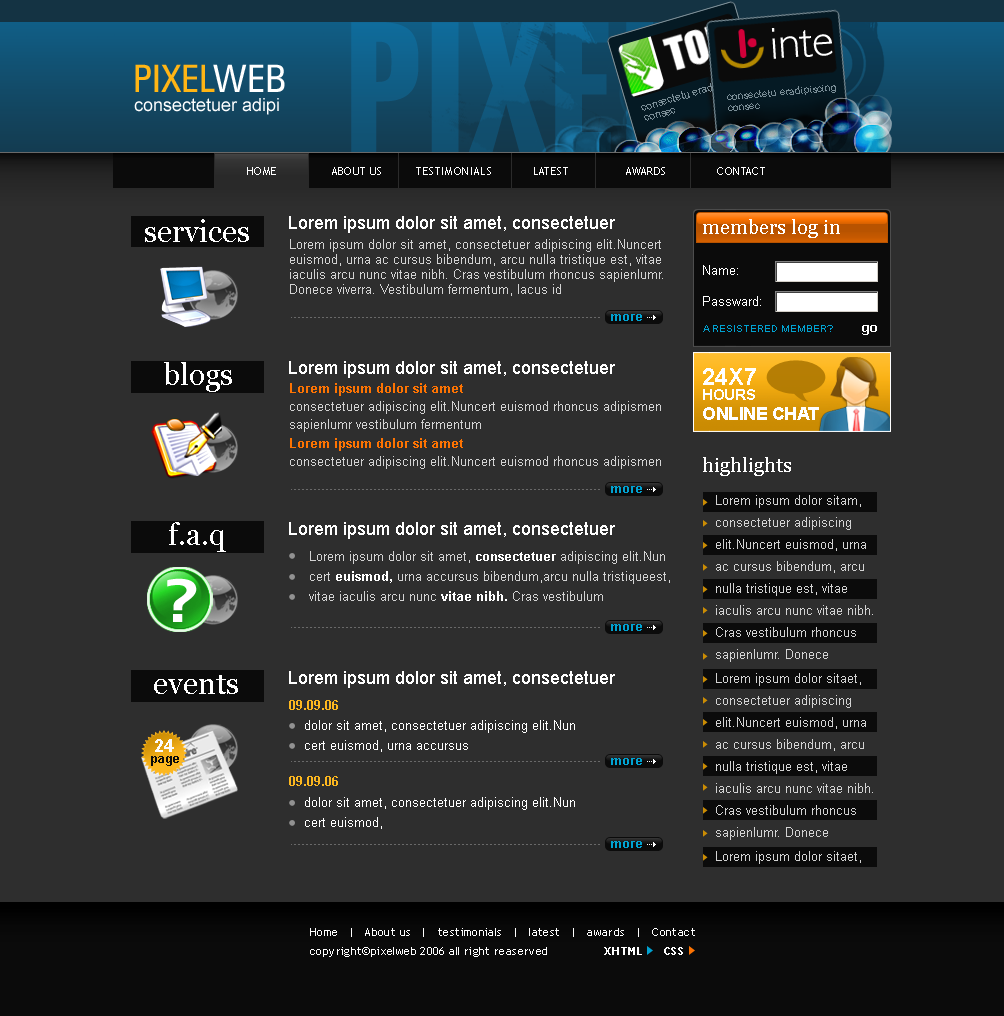
<style>
.page{position:relative;width:1004px;height:1016px;background:#2e2e2e}
.page>*{position:absolute;margin:0}
.t1{font:45px "Humanist521BT-Light";color:#ffffff}
.t2{font:38px "ZurichBT-RomanCondensed";color:#ffb515;text-transform:uppercase}
.t3{font:38px "ZurichBT-RomanCondensed";color:#ffffff;text-transform:uppercase}
.t4{font:10px "ArialMT";color:#7a8d96}
.t5{font:18px "ArialMT";color:#ffffff}
.t6{font:11px "TrebuchetMS";letter-spacing:0.035em;color:#ffffff;text-transform:uppercase}
.t7{font:30px "Georgia";color:#ffffff}
.t8{font:20px "Georgia";color:#ffffff}
.t9{font:13px/15px "ArialMT";color:#d3d3d3}
.t10{font:13px "ArialMT";color:#ffffff}
.t11{font:13px "Arial-BoldMT";color:#00a2d1}
.t12{font:10px "ArialMT";color:#00a2d1;text-transform:uppercase}
.t13{font:13px "Tahoma-Bold";color:#ffffff}
.t14{font:24px "Arial-BoldMT";color:#ffffff;text-transform:uppercase}
.t15{font:13px/18px "ArialMT";color:#d3d3d3}
.t16{font:13px/15px "Arial-BoldMT";color:#fd7302}
.t17{font:15px "Arial-BoldMT";letter-spacing:-0.025em;color:#ffffff;text-transform:uppercase}
.t18{font:18px "Arial-BoldMT";letter-spacing:-0.025em;color:#ffffff;text-transform:uppercase}
.t19{font:13px/18px "Arial-BoldMT";color:#fd7302}
.t20{font:13px/22px "ArialMT";color:#d3d3d3}
.t21{font:13px/20px "ArialMT";color:#d3d3d3}
.t22{font:13px/20px "Arial-BoldMT";color:#ffffff}
.t23{font:60px "ZurichBT-BoldExtended";letter-spacing:0.035em;color:#ffffff;text-transform:uppercase}
.t24{font:13px "Arial-BoldMT";color:#fcb71f}
.t25{font:13px/20px "ArialMT";color:#ffffff}
.t26{font:13px/20px "Arial-BoldMT";color:#fcb71f}
.t27{font:18px "Arial-BoldMT";color:#fbfbfb}
.t28{font:13px "Arial-BoldMT";letter-spacing:-0.05em;color:#0b0b0b}
.t29{font:13px "ArialMT";color:#d3d3d3}
.t30{font:11px "TrebuchetMS";letter-spacing:0.035em;color:#ffffff}
.t31{font:11px "TrebuchetMS-Bold";letter-spacing:0.035em;color:#ffffff;text-transform:uppercase}
</style>
<div class="page">
<p class="t1" style="left:771px;top:28px;width:62px;height:31px;rotate:-4deg">inte</p>
<p class="t2" style="left:135px;top:64px;width:150px;height:28px">pixel<span class="t3">web</span></p>
<p class="t4" style="left:727px;top:85px;width:109px;height:15px;rotate:-5deg">consectetu eradipiscing</p>
<p class="t5" style="left:134px;top:98px;width:145px;height:17px">consectetuer adipi</p>
<p class="t4" style="left:644px;top:108px;width:31px;height:13px;rotate:-16deg">consec</p>
<p class="t4" style="left:728px;top:103px;width:32px;height:8px;rotate:-5deg">consec</p>
<p class="t6" style="left:247px;top:167px;width:518px;height:8px">Home                About us          testimonials            latest                 awards               Contact</p>
<p class="t7" style="left:145px;top:219px;width:104px;height:23px">services</p>
<p class="t5" style="left:289px;top:216px;width:326px;height:17px">Lorem ipsum dolor sit amet, consectetuer</p>
<p class="t8" style="left:703px;top:219px;width:137px;height:19px">members log in</p>
<p class="t9" style="left:290px;top:239px;width:373px;height:57px">Lorem ipsum dolor sit amet, consectetuer adipiscing elit.Nuncert euismod, urna ac cursus bibendum, arcu nulla tristique est, vitae iaculis arcu nunc vitae nibh. Cras vestibulum rhoncus sapienlumr. Donece viverra. Vestibulum fermentum, lacus id</p>
<p class="t10" style="left:703px;top:265px;width:35px;height:10px">Name:</p>
<p class="t10" style="left:703px;top:296px;width:58px;height:10px">Passward:</p>
<p class="t11" style="left:611px;top:314px;width:31px;height:7px">more</p>
<p class="t12" style="left:703px;top:325px;width:130px;height:7px">a resistered member?</p>
<p class="t13" style="left:862px;top:325px;width:15px;height:10px">go</p>
<p class="t7" style="left:164px;top:362px;width:68px;height:30px">blogs</p>
<p class="t5" style="left:289px;top:361px;width:326px;height:17px">Lorem ipsum dolor sit amet, consectetuer</p>
<p class="t14" style="left:703px;top:368px;width:53px;height:17px">24x7</p>
<p class="t15" style="left:290px;top:383px;width:371px;height:49px"><span class="t16">Lorem ipsum dolor sit amet <br></span>consectetuer adipiscing elit.Nuncert euismod rhoncus adipismen sapienlumr vestibulum fermentum</p>
<p class="t17" style="left:703px;top:389px;width:52px;height:11px">hours</p>
<p class="t18" style="left:703px;top:407px;width:116px;height:13px">online chat</p>
<p class="t15" style="left:290px;top:438px;width:371px;height:31px"><span class="t19">Lorem ipsum dolor sit amet</span><br>consectetuer adipiscing elit.Nuncert euismod rhoncus adipismen</p>
<p class="t8" style="left:703px;top:457px;width:88px;height:19px">highlights</p>
<p class="t11" style="left:611px;top:486px;width:31px;height:7px">more</p>
<p class="t20" style="left:716px;top:495px;width:157px;height:167px">Lorem ipsum dolor sitam, consectetuer adipiscing elit.Nuncert euismod, urna ac cursus bibendum, arcu nulla tristique est, vitae iaculis arcu nunc vitae nibh. Cras vestibulum rhoncus sapienlumr. Donece</p>
<p class="t7" style="left:169px;top:522px;width:57px;height:30px">f.a.q</p>
<p class="t5" style="left:289px;top:522px;width:326px;height:17px">Lorem ipsum dolor sit amet, consectetuer</p>
<p class="t21" style="left:309px;top:551px;width:361px;height:50px">Lorem ipsum dolor sit amet, <span class="t22">consectetuer </span>adipiscing elit.Nun<br>cert<span class="t22"> euismod,</span> urna accursus bibendum,arcu nulla tristiqueest, vitae iaculis arcu nunc <span class="t22">vitae nibh.</span> Cras vestibulum</p>
<p class="t23" style="left:167px;top:578px;width:30px;height:44px">?</p>
<p class="t11" style="left:611px;top:624px;width:31px;height:7px">more</p>
<p class="t7" style="left:154px;top:675px;width:84px;height:19px">events</p>
<p class="t5" style="left:289px;top:671px;width:326px;height:17px">Lorem ipsum dolor sit amet, consectetuer</p>
<p class="t20" style="left:716px;top:673px;width:157px;height:167px">Lorem ipsum dolor sitaet, consectetuer adipiscing elit.Nuncert euismod, urna ac cursus bibendum, arcu nulla tristique est, vitae iaculis arcu nunc vitae nibh. Cras vestibulum rhoncus sapienlumr. Donece</p>
<p class="t24" style="left:289px;top:700px;width:49px;height:10px">09.09.06</p>
<p class="t25" style="left:305px;top:720px;width:270px;height:32px"><span class="t26"><br></span>dolor sit amet, consectetuer adipiscing elit.Nun<br>cert euismod, urna accursus</p>
<p class="t27" style="left:155px;top:739px;width:19px;height:13px">24</p>
<p class="t28" style="left:151px;top:756px;width:28px;height:10px">page</p>
<p class="t11" style="left:611px;top:758px;width:31px;height:7px">more</p>
<p class="t24" style="left:289px;top:776px;width:49px;height:10px">09.09.06</p>
<p class="t25" style="left:305px;top:797px;width:270px;height:32px"><span class="t26"><br></span>dolor sit amet, consectetuer adipiscing elit.Nun<br>cert euismod,</p>
<p class="t11" style="left:611px;top:841px;width:31px;height:7px">more</p>
<p class="t29" style="left:716px;top:851px;width:145px;height:13px">Lorem ipsum dolor sitaet,</p>
<p class="t30" style="left:310px;top:928px;width:385px;height:9px">Home   |   About us   |   testimonials   |   latest   |   awards   |   Contact</p>
<p class="t30" style="left:310px;top:947px;width:237px;height:10px">copyright©pixelweb 2006 all right reaserved</p>
<p class="t31" style="left:604px;top:947px;width:38px;height:8px">xhtml</p>
<p class="t31" style="left:664px;top:947px;width:19px;height:8px">css</p>
</div>
